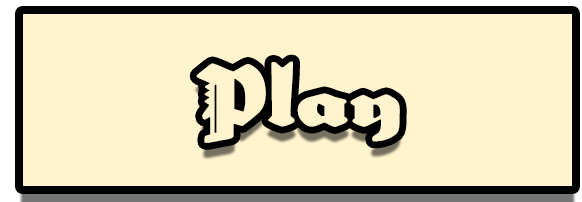
<style>
.page{position:relative;width:582px;height:202px;background:#fff4ce}
.page>*{position:absolute;margin:0}
.t1{font:79.9px "Neptun";color:#fff4ce}
</style>
<div class="page">
<p class="t1" style="left:196px;top:61px;width:204px;height:82px">Play</p>
</div>
